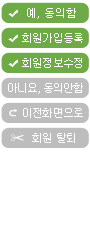
<style>
.page{position:relative;width:90px;height:250px;background:#ffffff}
.page>*{position:absolute;margin:0}
.t1{font:11px "Gulim";color:#ffffff}
.t2{font:11px "Gulim";letter-spacing:-0.075em;color:#ffffff}
</style>
<div class="page">
<p class="t1" style="left:27px;top:8px;width:49px;height:11px">예, 동의함</p>
<p class="t2" style="left:22px;top:33px;width:61px;height:10px">회원가입등록</p>
<p class="t2" style="left:22px;top:58px;width:60px;height:10px">회원정보수정</p>
<p class="t2" style="left:8px;top:83px;width:75px;height:11px">아니요, 동의안함</p>
<p class="t2" style="left:23px;top:108px;width:60px;height:10px">이전화면으로</p>
<p class="t2" style="left:32px;top:133px;width:43px;height:10px">회원 탈퇴</p>
</div>
